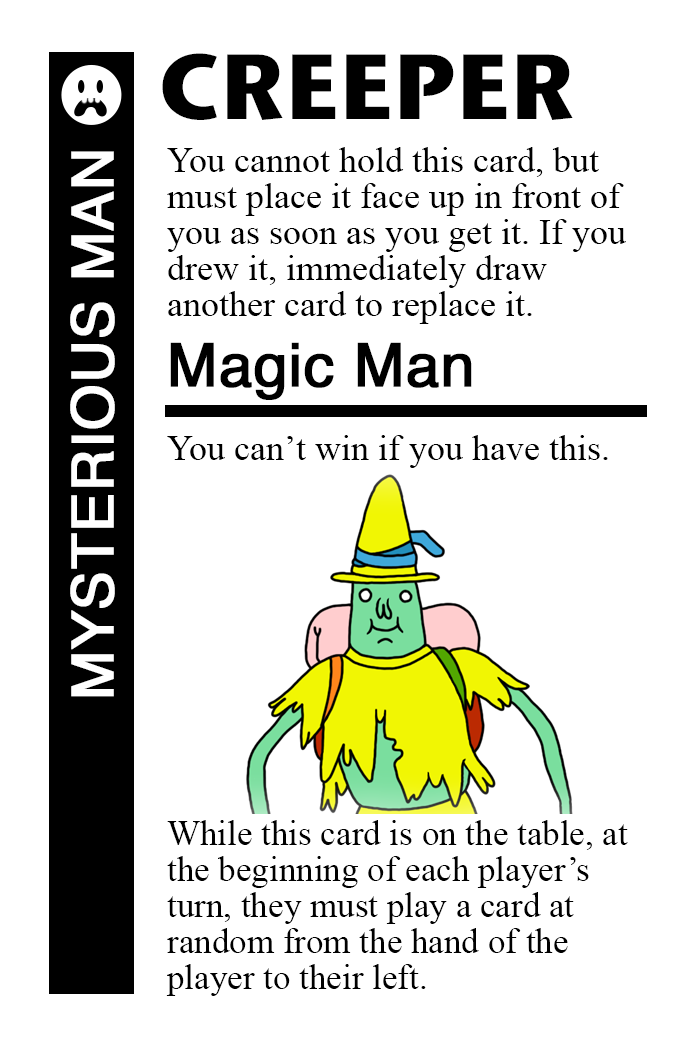
<style>
.page{position:relative;width:700px;height:1042px;background:#ffffff}
.page>*{position:absolute;margin:0}
.t1{font:92px "StoneSansITC-Bold";color:#000000}
.t2{font:36px/36px "TimesNewRomanPSMT";color:#000000}
.t3{font:58px "Helvetica";color:#ffffff;font-weight:bold}
.t4{font:60px "Helvetica";color:#000000;font-weight:bold}
.t5{font:36px "TimesNewRomanPSMT";color:#000000}
.t6{font:35px/36px "TimesNewRomanPSMT";color:#000000}
</style>
<div class="page">
<p class="t1" style="left:162px;top:53px;width:411px;height:67px">CREEPER</p>
<p class="t2" style="left:167px;top:147px;width:459px;height:177px">You cannot hold this card, but<br>must place it face up in front of<br>you as soon as you get it. If you <br>drew it, immediately draw<br>another card to replace it.</p>
<p class="t3" style="left:70px;top:151px;width:45px;height:546px;rotate:-90deg">MYSTERIOUS MAN</p>
<p class="t4" style="left:170px;top:342px;width:302px;height:58px">Magic Man</p>
<p class="t5" style="left:167px;top:435px;width:441px;height:33px">You can’t win if you have this.</p>
<p class="t6" style="left:166px;top:820px;width:462px;height:176px">While this card is on the table, at <br>the beginning of each player’s <br>turn, they must play a card at <br>random from the hand of the <br>player to their left.</p>
</div>
